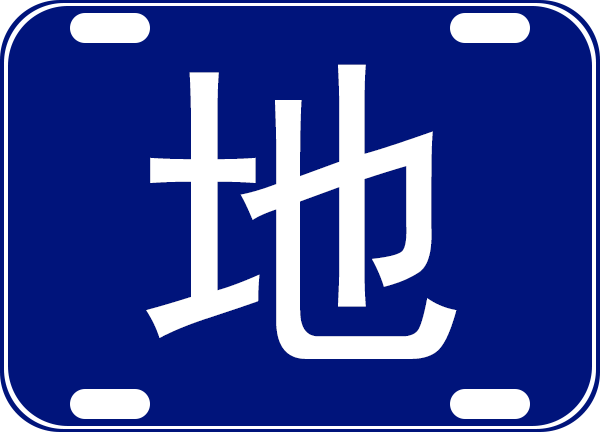
<style>
.page{position:relative;width:600px;height:432px;background:#00147b}
.page>*{position:absolute;margin:0}
.t1{font:336px "SimHei";color:#ffffff}
</style>
<div class="page">
<p class="t1" style="left:146px;top:64px;width:311px;height:295px">地</p>
</div>
